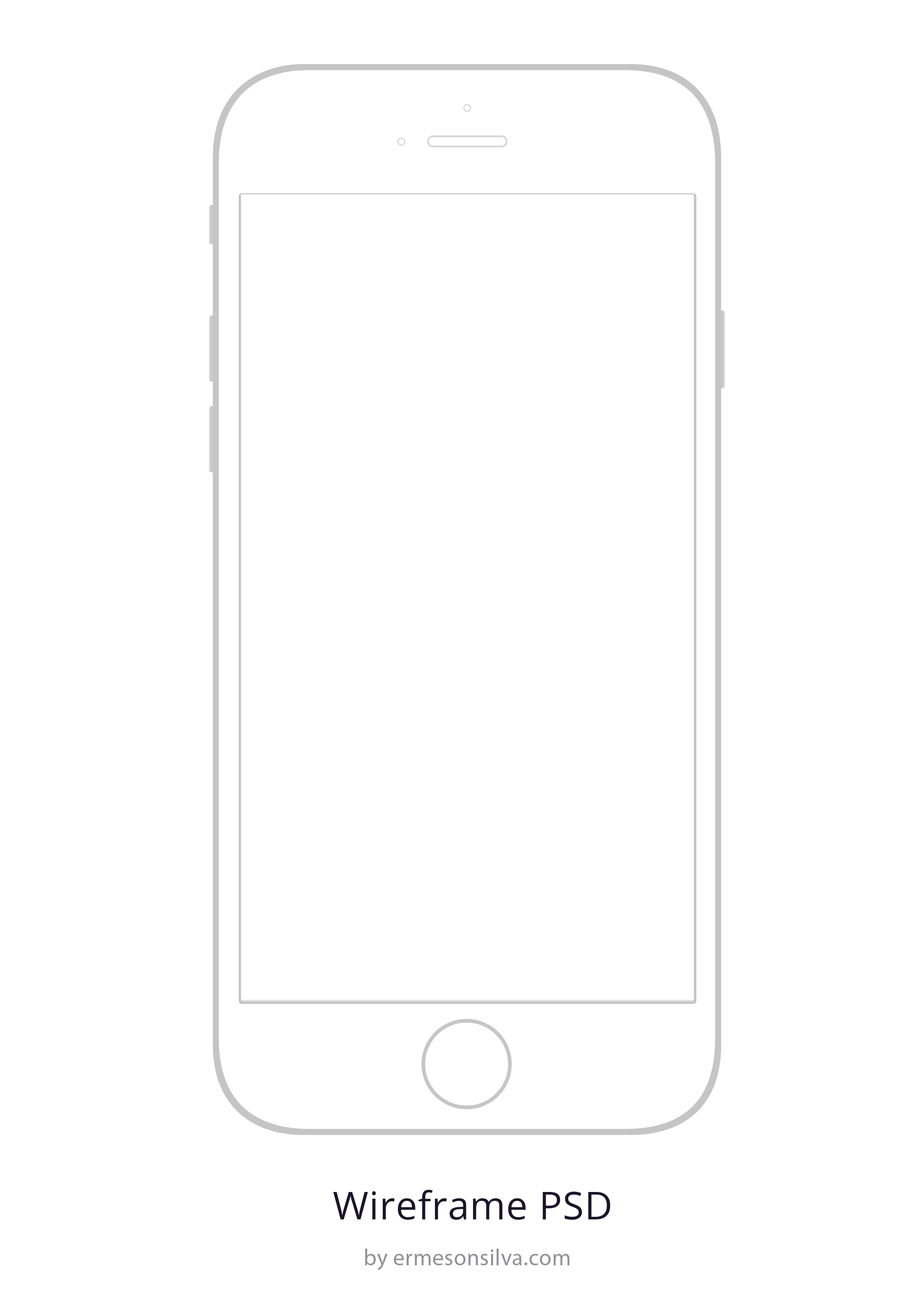
<style>
.page{position:relative;width:918px;height:1299px;background:#ffffff}
.page>*{position:absolute;margin:0}
.t1{font:38.5px "OpenSans";letter-spacing:0.015em;color:#1b152b}
.t2{font:23px "MyriadPro-Regular";letter-spacing:0.015em;color:#939197}
</style>
<div class="page">
<p class="t1" style="left:333px;top:1190px;width:277px;height:30px">Wireframe PSD</p>
<p class="t2" style="left:365px;top:1248px;width:205px;height:22px">by ermesonsilva.com</p>
</div>
